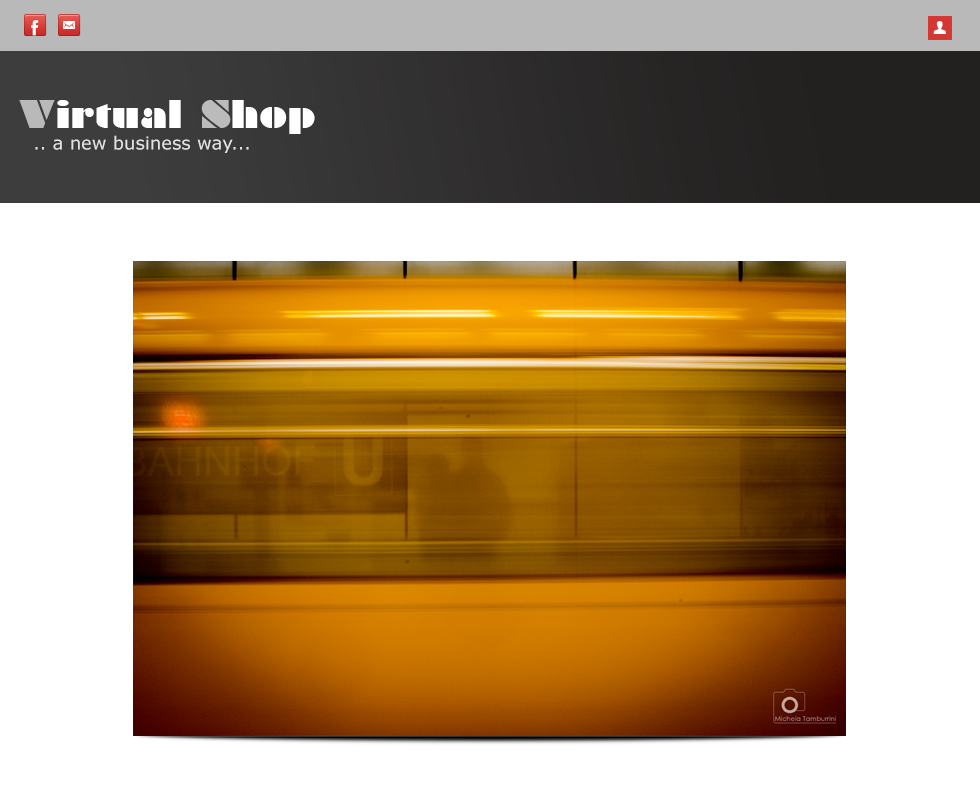
<style>
.page{position:relative;width:980px;height:800px;background:#ffffff}
.page>*{position:absolute;margin:0}
.t1{font:36px "Braggadocio";color:#ffffff}
.t2{font:36px "Braggadocio";color:#b9b9b9}
.t3{font:36px "Braggadocio";color:#bbbbbb}
.t4{font:18px "Verdana";color:#e3e3e3}
</style>
<div class="page">
<p class="t1" style="left:19px;top:100px;width:296px;height:34px"><span class="t2">V</span>irtual <span class="t3">S</span>hop</p>
<p class="t4" style="left:35px;top:135px;width:214px;height:18px">.. a new business way...</p>
</div>
